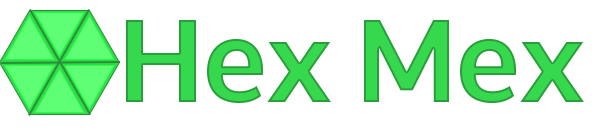
<style>
.page{position:relative;width:600px;height:130px;background:#ffffff}
.page>*{position:absolute;margin:0}
.t1{font:116.7px "Oxygen-Bold";color:#36d84d}
</style>
<div class="page">
<p class="t1" style="left:126px;top:20px;width:458px;height:84px">Hex Mex</p>
</div>
